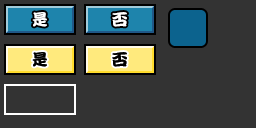
<style>
.page{position:relative;width:256px;height:128px;background:#333333}
.page>*{position:absolute;margin:0}
.t1{font:16px "DFPKanTingLiuW9";letter-spacing:-0.1em;color:#ffffff}
.t2{font:16px "DFPKanTingLiuW9";letter-spacing:-0.1em;color:#000000}
</style>
<div class="page">
<p class="t1" style="left:32px;top:12px;width:15px;height:15px">是</p>
<p class="t1" style="left:112px;top:12px;width:15px;height:15px">否</p>
<p class="t2" style="left:32px;top:52px;width:15px;height:15px">是</p>
<p class="t2" style="left:112px;top:52px;width:15px;height:15px">否</p>
</div>
